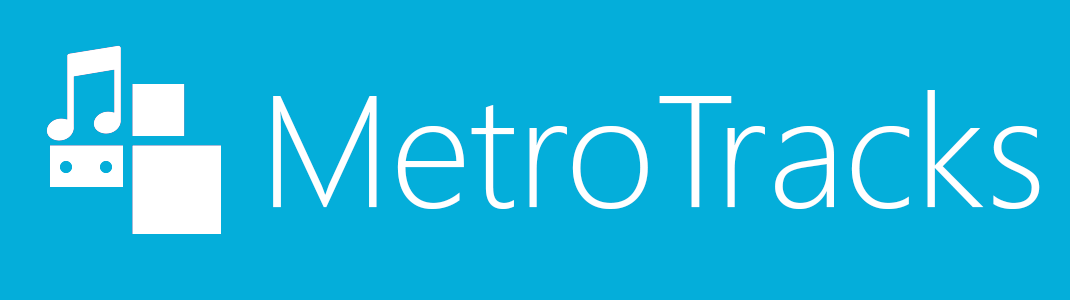
<style>
.page{position:relative;width:1070px;height:300px;background:#04aeda}
.page>*{position:absolute;margin:0}
.t1{font:158px "SegoeUI-Light";color:#ffffff}
</style>
<div class="page">
<p class="t1" style="left:273px;top:90px;width:767px;height:119px">MetroTracks</p>
</div>
